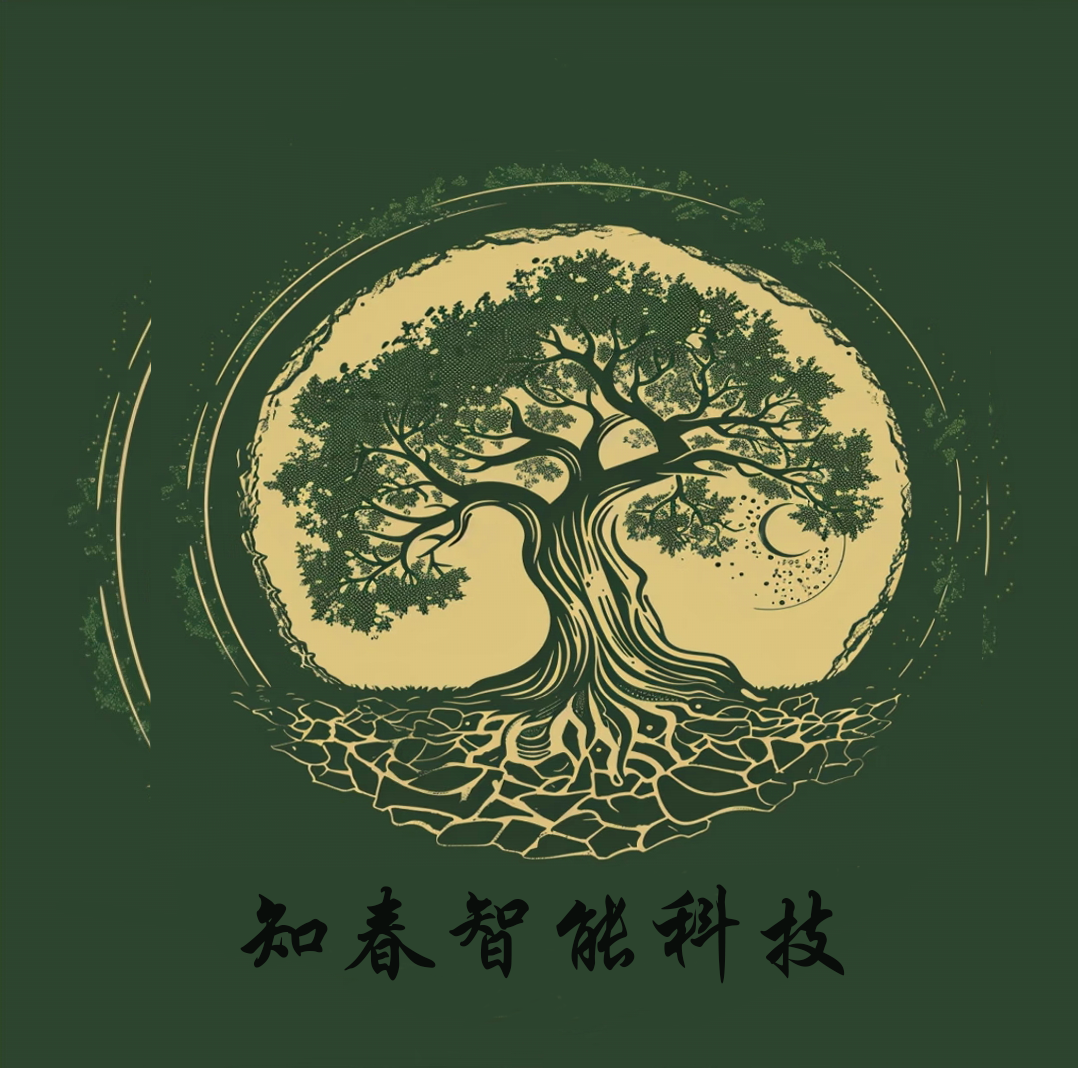
<style>
.page{position:relative;width:1078px;height:1068px;background:#2c442e}
.page>*{position:absolute;margin:0}
.t1{font:72px "STXingkai";color:#090d0a}
</style>
<div class="page">
<p class="t1" style="left:240px;top:884px;width:605px;height:100px">知春智能科技</p>
</div>
